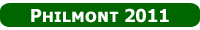
<style>
.page{position:relative;width:200px;height:30px;background:#006600}
.page>*{position:absolute;margin:0}
.t1{font:17.9px "TahomaSmallCap-Bold";color:#ffffff}
</style>
<div class="page">
<p class="t1" style="left:31px;top:8px;width:138px;height:15px">Philmont 2011</p>
</div>
